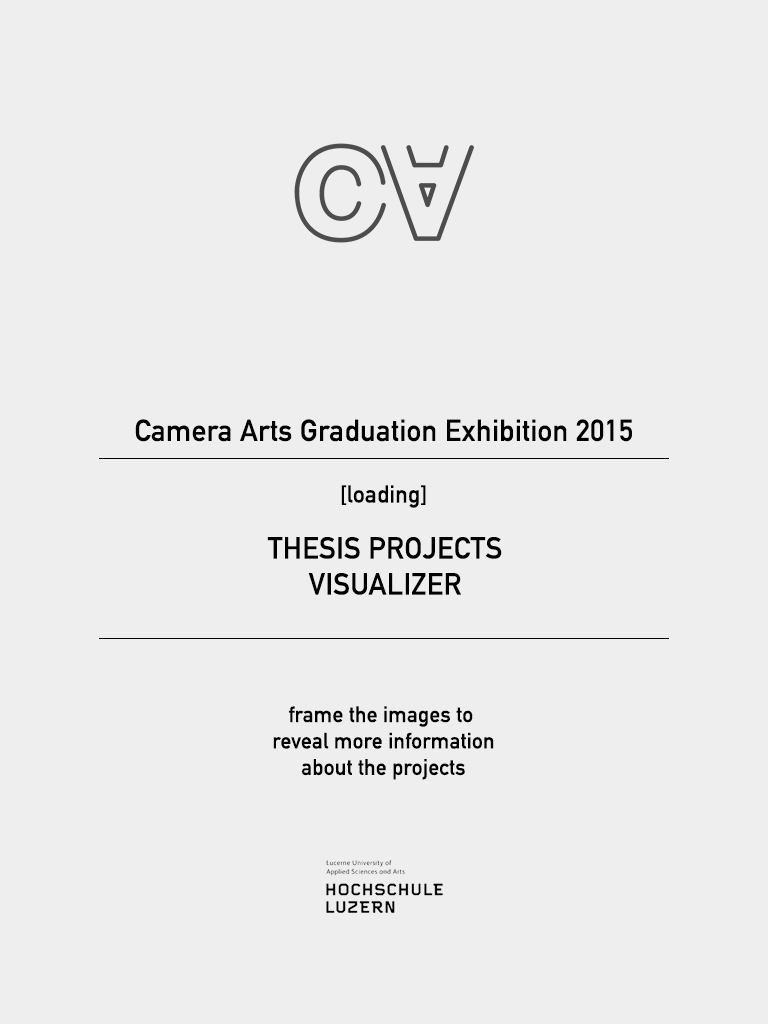
<style>
.page{position:relative;width:768px;height:1024px;background:#eeeeee}
.page>*{position:absolute;margin:0}
.t1{font:30px "DINAlternate-Bold";color:#000000}
.t2{font:24px "DINAlternate-Bold";color:#000000}
.t3{font:22px "DINAlternate-Bold";color:#000000}
</style>
<div class="page">
<p class="t1" style="left:135px;top:419px;width:497px;height:23px">Camera Arts Graduation Exhibition 2015</p>
<p class="t2" style="left:341px;top:485px;width:85px;height:23px">[loading]</p>
<p class="t1" style="left:267px;top:537px;width:235px;height:58px;text-align:center">THESIS PROJECTS<br>VISUALIZER</p>
<p class="t3" style="left:273px;top:706px;width:221px;height:74px;text-align:center">frame the images to <br>reveal more information<br>about the projects</p>
</div>
